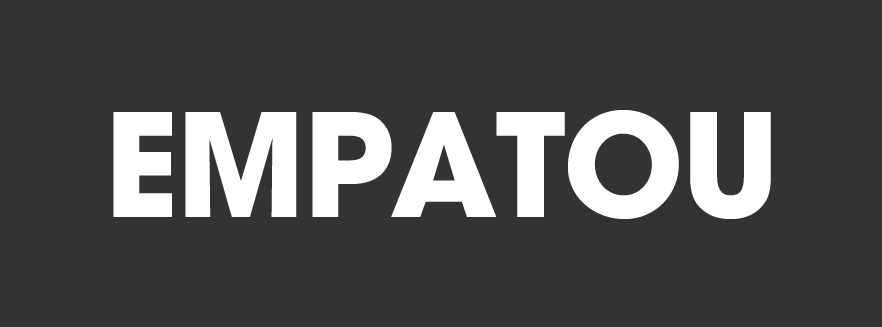
<style>
.page{position:relative;width:882px;height:327px;background:#333333}
.page>*{position:absolute;margin:0}
.t1{font:243.2px "ITCAvantGardePro-Bold";letter-spacing:-0.02em;color:#ffffff;text-transform:uppercase}
</style>
<div class="page">
<p class="t1" style="left:113px;top:110px;width:658px;height:109px">empatou</p>
</div>
